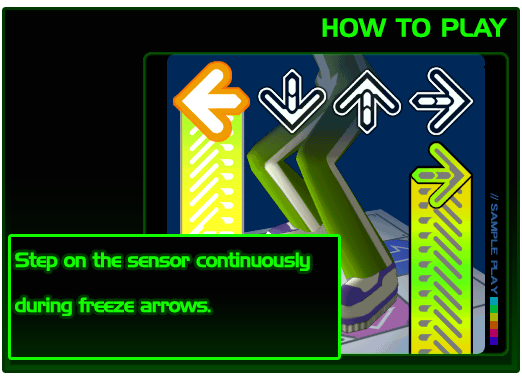
<style>
.page{position:relative;width:522px;height:380px;background:#020202}
.page>*{position:absolute;margin:0}
.t1{font:25px "HandelGothicBT-Regular";color:#14fc00}
.t2{font:20px/45.1px "HandelGothicBT-Regular";letter-spacing:-0.05em;color:#14fc00}
</style>
<div class="page">
<p class="t1" style="left:322px;top:18px;width:185px;height:20px">HOW TO PLAY</p>
<p class="t2" style="left:15px;top:252px;width:295px;height:64px">Step on the sensor continuously<br>during freeze arrows.</p>
</div>
